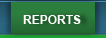
<style>
.page{position:relative;width:106px;height:38px}
.page>*{position:absolute;margin:0}
.t1{font:12px "Arial-BoldMT";color:#ffffff}
</style>
<div class="page">
<p class="t1" style="left:23px;top:15px;width:58px;height:9px">REPORTS</p>
</div>
